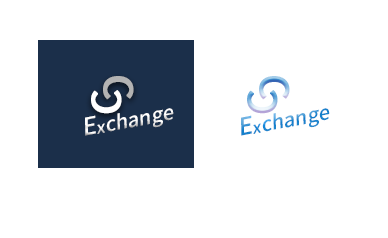
<style>
.page{position:relative;width:388px;height:238px;background:#ffffff}
.page>*{position:absolute;margin:0}
.t1{font:39.5px "NotoSansCJKkr-Medium";color:#b3b3b3;font-weight:bold}
.t2{font:39.5px "NotoSansCJKkr-Medium";font-weight:bold}
.t3{font:39.5px "NotoSansCJKkr-Medium";color:#ffffff;font-weight:bold}
.t4{font:20px "NotoSansCJKkr-Medium";color:#ffffff;font-style:italic}
.t5{font:24px "NotoSansCJKkr-Medium";color:#ffffff;font-style:italic}
.t6{font:16px "NotoSansCJKkr-Medium";color:#ffffff;font-style:italic}
.t7{font:20px "NotoSansCJKkr-Medium";font-style:italic}
.t8{font:24px "NotoSansCJKkr-Medium";font-style:italic}
.t9{font:16px "NotoSansCJKkr-Medium";font-style:italic}
</style>
<div class="page">
<p class="t1" style="left:103px;top:76px;width:31px;height:24px;rotate:90deg">C</p>
<p class="t2" style="left:259px;top:76px;width:31px;height:24px;rotate:90deg">C</p>
<p class="t3" style="left:91px;top:90px;width:31px;height:24px;rotate:-90deg">C</p>
<p class="t2" style="left:247px;top:90px;width:31px;height:24px;rotate:-90deg">C</p>
<p class="t4" style="left:85px;top:108px;width:89px;height:28px;rotate:-11deg"><span class="t5">E</span><span class="t6">x</span>change</p>
<p class="t7" style="left:241px;top:108px;width:89px;height:28px;rotate:-11deg"><span class="t8">E</span><span class="t9">x</span>change</p>
</div>
